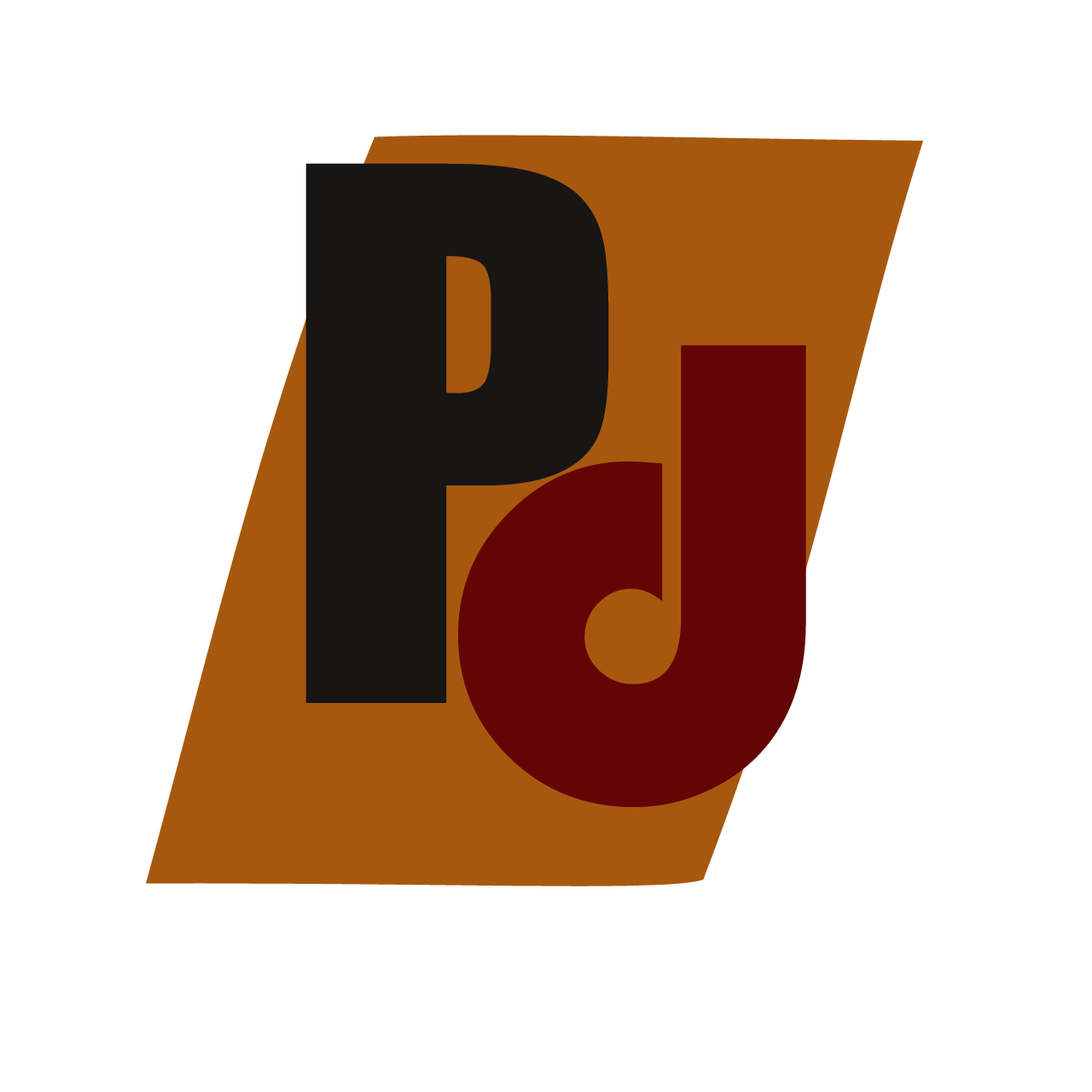
<style>
.page{position:relative;width:1092px;height:1092px;background:#ffffff}
.page>*{position:absolute;margin:0}
.t1{font:682.5px "Impact";color:#181515}
.t2{font:682.5px "Bauhaus93";color:#640505}
</style>
<div class="page">
<p class="t1" style="left:305px;top:163px;width:304px;height:540px">P</p>
<p class="t2" style="left:458px;top:345px;width:348px;height:462px">d</p>
</div>
